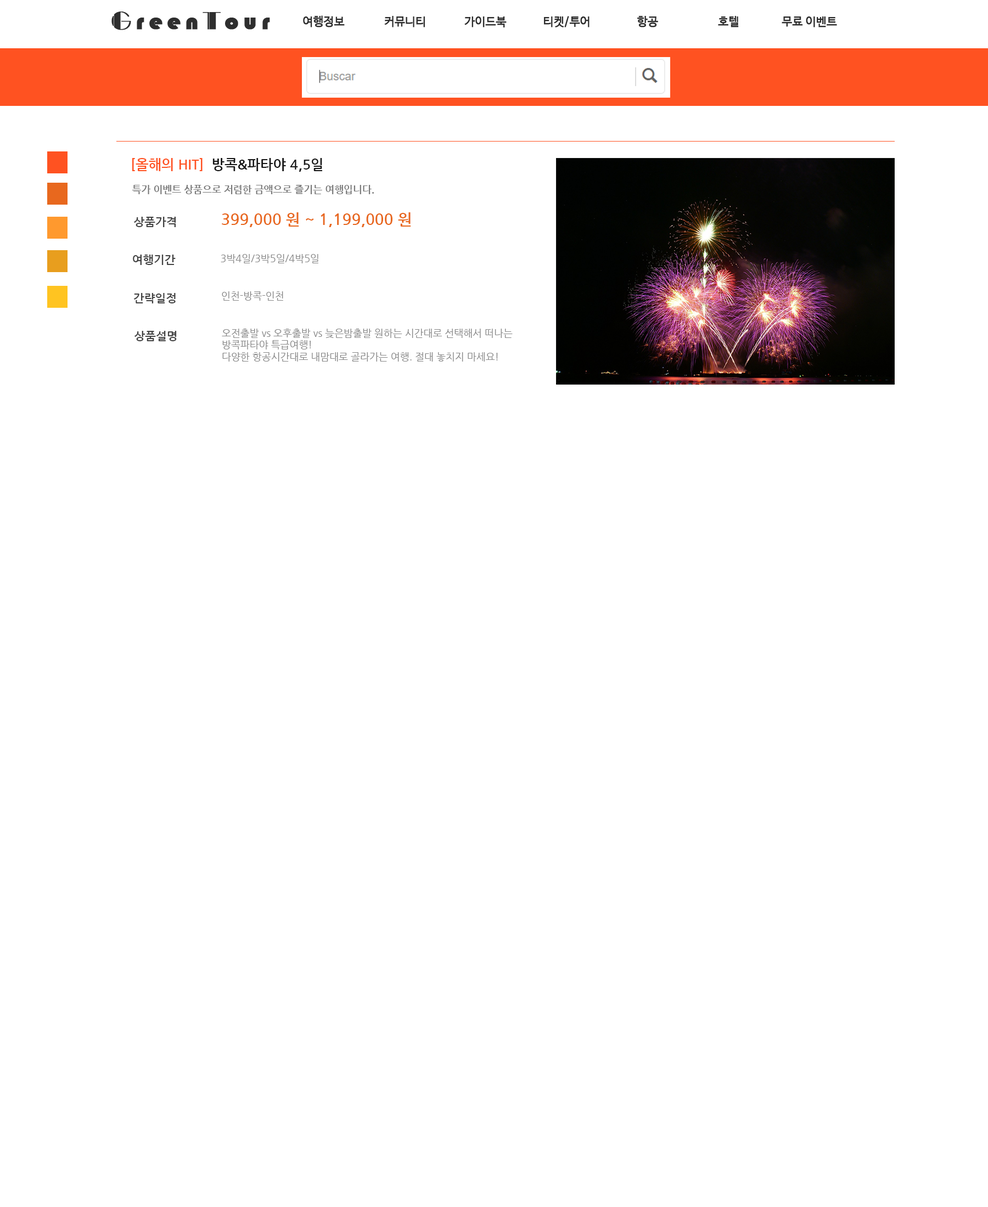
<style>
.page{position:relative;width:988px;height:1207px;background:#ffffff}
.page>*{position:absolute;margin:0}
.t1{font:13.7px "NanumGothicBold";color:#161616}
.t2{font:13.7px "NanumGothicBold";color:#ff5221}
.t3{font:9.9px "NanumGothicBold";color:#7a7a7a}
.t4{font:11.5px "NanumGothicBold";color:#444444}
.t5{font:15.4px "NanumGothicBold";color:#e8681e}
.t6{font:9.9px "NanumGothic";color:#888888}
</style>
<div class="page">
<p class="t1" style="left:132px;top:158px;width:190px;height:14px"><span class="t2">[올해의 HIT]  </span>방콕&amp;파타야 4,5일</p>
<p class="t3" style="left:132px;top:184px;width:242px;height:10px">특가 이벤트 상품으로 저렴한 금액으로 즐기는 여행입니다.</p>
<p class="t4" style="left:134px;top:217px;width:42px;height:10px">상품가격</p>
<p class="t5" style="left:222px;top:212px;width:189px;height:15px">399,000 원 ~ 1,199,000 원</p>
<p class="t4" style="left:133px;top:255px;width:43px;height:10px">여행기간</p>
<p class="t6" style="left:221px;top:254px;width:97px;height:9px">3박4일/3박5일/4박5일</p>
<p class="t4" style="left:134px;top:293px;width:42px;height:10px">간략일정</p>
<p class="t6" style="left:222px;top:291px;width:61px;height:10px">인천-방콕-인천</p>
<p class="t6" style="left:222px;top:328px;width:291px;height:34px">오전출발 vs 오후출발 vs 늦은밤출발 원하는 시간대로 선택해서 떠나는<br>방콕파타야 특급여행!<br>다양한 항공시간대로 내맘대로 골라가는 여행. 절대 놓치지 마세요!</p>
<p class="t4" style="left:134px;top:331px;width:43px;height:10px">상품설명</p>
</div>
